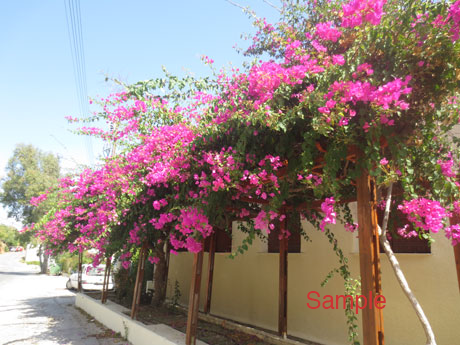
<style>
.page{position:relative;width:460px;height:345px}
.page>*{position:absolute;margin:0}
.t1{font:24px "Helvetica";color:#cc3333}
</style>
<div class="page">
<p class="t1" style="left:306px;top:291px;width:80px;height:23px">Sample</p>
</div>
